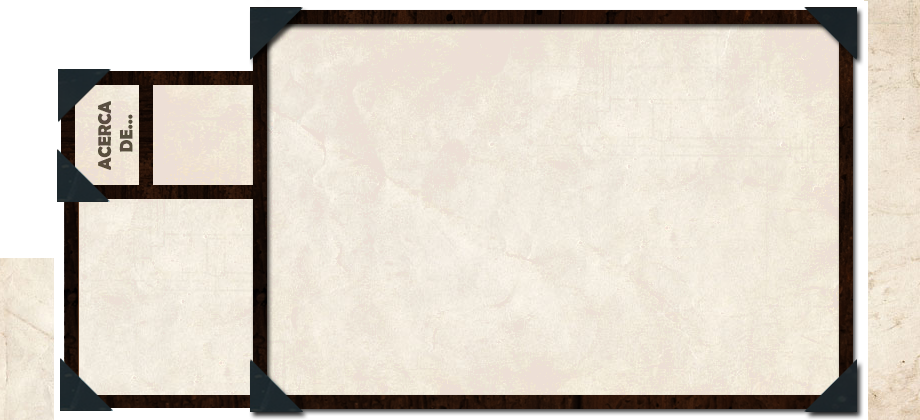
<style>
.page{position:relative;width:920px;height:420px}
.page>*{position:absolute;margin:0}
.t1{font:18px "BerlinSansFBDemi-Bold";color:#584f3e}
</style>
<div class="page">
<p class="t1" style="left:98px;top:101px;width:35px;height:69px;text-align:center;rotate:-90deg">ACERCA <br>DE...</p>
</div>
